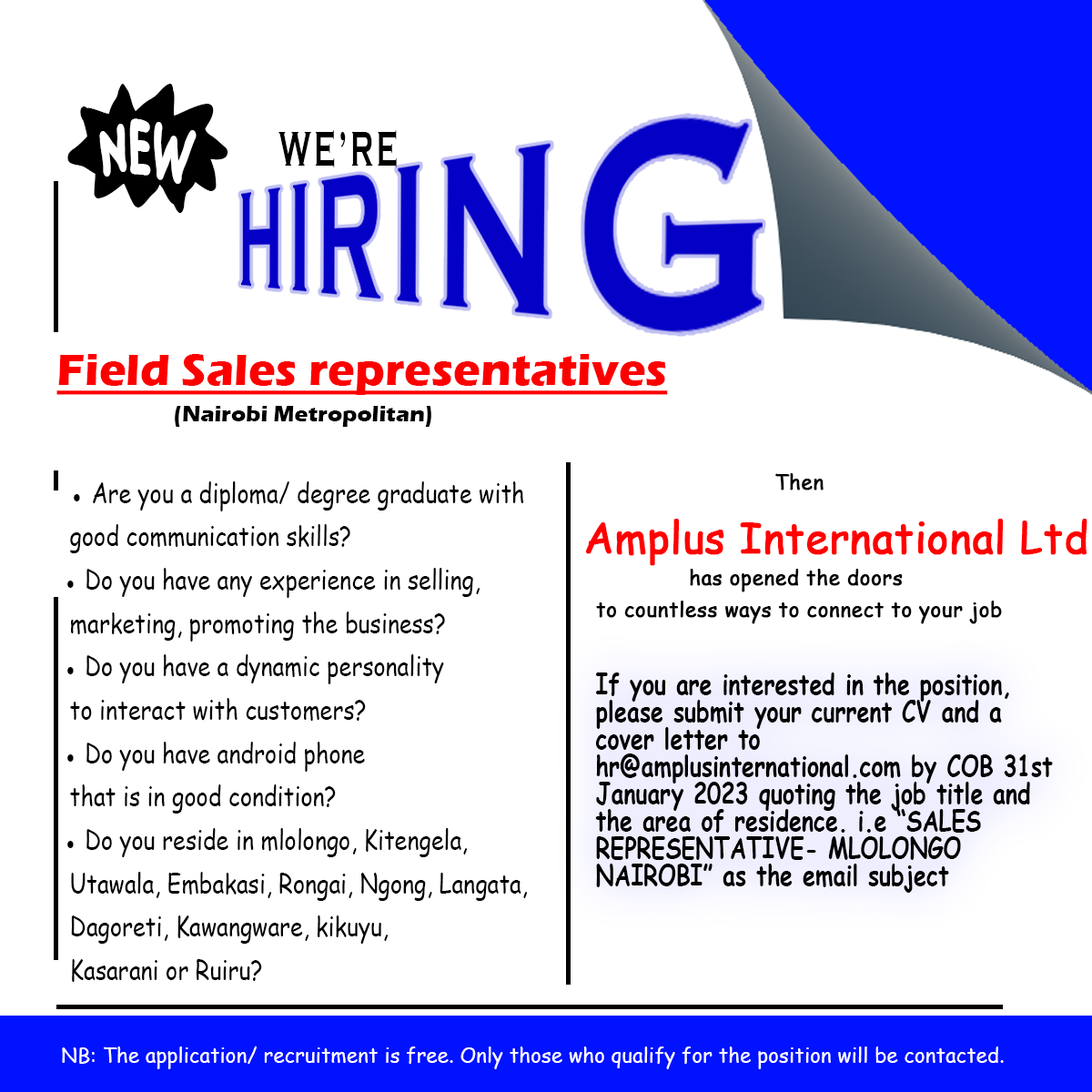
<style>
.page{position:relative;width:1092px;height:1092px;background:#ffffff}
.page>*{position:absolute;margin:0}
.t1{font:49.3px "CopperplateGothic-Bold";letter-spacing:0.1em;color:#000000;text-transform:uppercase;scale:0.58 1}
.t2{font:45.5px "ErasITC-Bold";color:#fe0101;text-decoration:underline}
.t3{font:22.7px "ErasITC-Bold";color:#000000}
.t4{font:21.2px "ComicSansMS";color:#000000;font-weight:bold;scale:0.96 1}
.t5{font:42.5px "ComicSansMS";color:#ff0000;font-weight:bold;scale:0.96 1}
.t6{font:27.1px/43.4px "ComicSansMS";color:#000000;scale:0.84 1}
.t7{font:28px "ComicSansMS-Bold";color:#000000;scale:0.81 1}
.t8{font:21.2px "ComicSansMS";color:#ffffff;scale:0.96 1}
</style>
<div class="page">
<p class="t1" style="left:278px;top:130px;width:119px;height:37px">we’re</p>
<p class="t2" style="left:56px;top:354px;width:612px;height:41px">Field Sales representatives</p>
<p class="t3" style="left:175px;top:406px;width:256px;height:21px">(Nairobi Metropolitan)</p>
<p class="t4" style="left:585px;top:473px;width:502px;height:151px;text-align:center">Then<br>             <span class="t5">Amplus International Ltd <br></span>has opened the doors <br>to countless ways to connect to your job</p>
<p class="t6" style="left:67px;top:481px;width:461px;height:501px">● Are you a diploma/ degree graduate with<br> good communication skills?<br>● Do you have any experience in selling,<br> marketing, promoting the business?<br>● Do you have a dynamic personality<br> to interact with customers?<br>● Do you have android phone<br> that is in good condition?<br>● Do you reside in mlolongo, Kitengela,<br> Utawala, Embakasi, Rongai, Ngong, Langata,<br> Dagoreti, Kawangware, kikuyu,<br> Kasarani or Ruiru?</p>
<p class="t7" style="left:595px;top:672px;width:458px;height:221px">If you are interested in the position,  please submit your current CV and a cover letter to hr@amplusinternational.com by COB 31st January 2023 quoting the job title and the area of residence. i.e “SALES REPRESENTATIVE- MLOLONGO NAIROBI” as the email subject</p>
<p class="t8" style="left:62px;top:1046px;width:942px;height:23px">NB: The application/ recruitment is free. Only those who qualify for the position will be contacted.</p>
</div>
